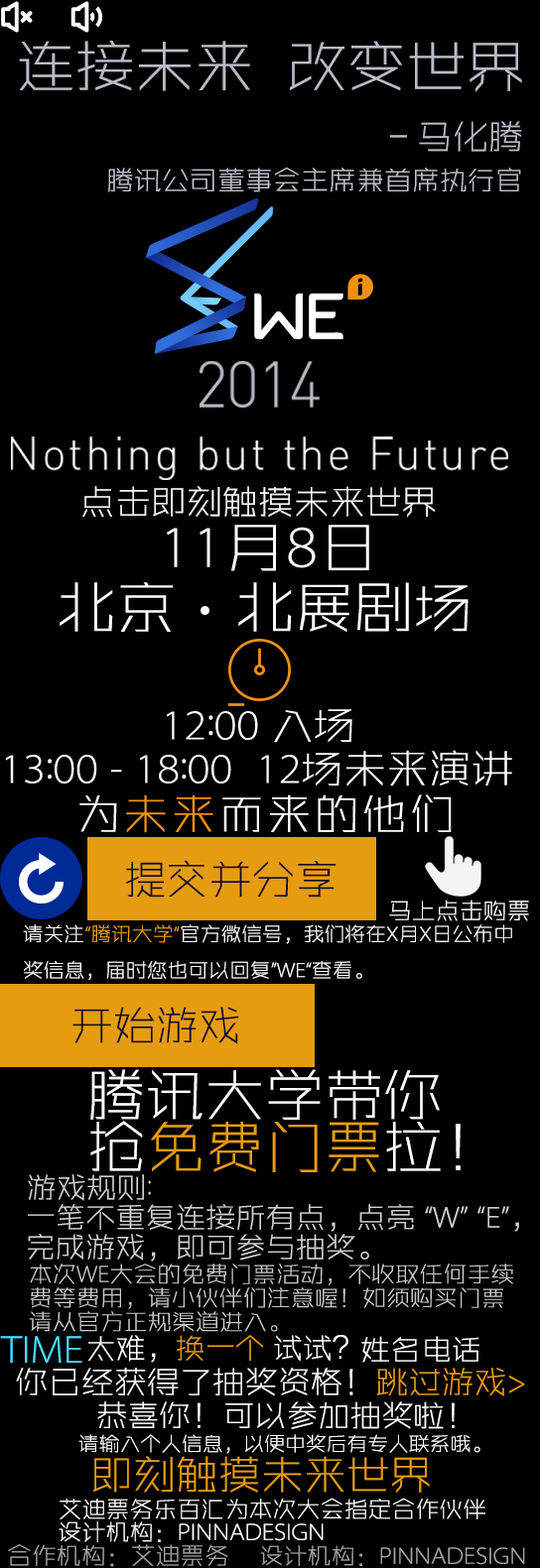
<style>
.page{position:relative;width:540px;height:1568px;background:#000000}
.page>*{position:absolute;margin:0}
.t1{font:59.5px "ZHSRXT--GBK1-0";color:#b9bbc7;text-transform:uppercase}
.t2{font:35.7px "ZHSRXT--GBK1-0";color:#b9bbc7;text-transform:uppercase}
.t3{font:27.8px "ZHSRXT--GBK1-0";color:#c0c1cd;text-transform:uppercase}
.t4{font:35.7px "ZHSRXT--GBK1-0";color:#f8f8f8;text-transform:uppercase}
.t5{font:42.6px "ZHSRXT--GBK1-0";color:#0b0a26;text-transform:uppercase}
.t6{font:23.8px "ZHSRXT--GBK1-0";color:#ffffff;text-transform:uppercase}
.t7{font:20.6px "ZHSRXT--GBK1-0";color:#ffffff;text-transform:uppercase}
.t8{font:20.6px "ZHSRXT--GBK1-0";color:#e69c11;text-transform:uppercase}
.t9{font:59.5px "ZHSRXT--GBK1-0";color:#ffffff;text-transform:uppercase}
.t10{font:59.5px "ZHSRXT--GBK1-0";color:#e69c11;text-transform:uppercase}
.t11{font:30px "ZHSRXT--GBK1-0";color:#d1d1d1;text-transform:uppercase}
.t12{font:39.1px "ZHSRXT--GBK1-0";color:#48ddff;text-transform:uppercase}
.t13{font:29.8px "ZHSRXT--GBK1-0";color:#ffffff;text-transform:uppercase}
.t14{font:29.8px "ZHSRXT--GBK1-0";color:#e69c11;text-transform:uppercase}
.t15{font:32.7px "ZHSRXT--GBK1-0";color:#ffffff;text-transform:uppercase}
.t16{font:32.7px "ZHSRXT--GBK1-0";color:#e69c11;text-transform:uppercase}
.t17{font:31.7px "ZHSRXT--GBK1-0";color:#ffffff;text-transform:uppercase}
.t18{font:42.6px "ZHSRXT--GBK1-0";color:#e69c11;text-transform:uppercase}
.t19{font:24.7px "ZHSRXT--GBK1-0";color:#a3a3a3;text-transform:uppercase}
.t20{font:23.8px "ZHSRXT--GBK1-0";color:#a3a3a3;text-transform:uppercase}
</style>
<div class="page">
<p class="t1" style="left:19px;top:41px;width:503px;height:51px">连接未来  改变世界</p>
<p class="t2" style="left:390px;top:121px;width:132px;height:31px">－马化腾</p>
<p class="t3" style="left:108px;top:167px;width:413px;height:25px">腾讯公司董事会主席兼首席执行官</p>
<p class="t4" style="left:82px;top:486px;width:352px;height:32px">点击即刻触摸未来世界</p>
<p class="t5" style="left:126px;top:860px;width:210px;height:38px">提交并分享</p>
<p class="t6" style="left:389px;top:900px;width:140px;height:21px">马上点击购票</p>
<p class="t7" style="left:23px;top:924px;width:489px;height:56px">请关注<span class="t8">“腾讯大学“</span>官方微信号，我们将在X月X日公布中<br>奖信息，届时您也可以回复”WE“查看。</p>
<p class="t5" style="left:72px;top:1007px;width:167px;height:37px">开始游戏</p>
<p class="t9" style="left:90px;top:1069px;width:349px;height:51px">腾讯大学带你</p>
<p class="t10" style="left:90px;top:1121px;width:370px;height:51px"><span class="t9">抢</span>免费门票<span class="t9">拉！</span></p>
<p class="t11" style="left:28px;top:1174px;width:123px;height:27px">游戏规则:</p>
<p class="t11" style="left:28px;top:1204px;width:491px;height:28px">一笔不重复连接所有点，点亮 “W” “E”，</p>
<p class="t11" style="left:28px;top:1234px;width:341px;height:28px">完成游戏，即可参与抽奖。</p>
<p class="t12" style="left:0px;top:1336px;width:82px;height:27px">time</p>
<p class="t13" style="left:88px;top:1335px;width:260px;height:28px">太难，<span class="t14">换一个 </span>试试？</p>
<p class="t13" style="left:361px;top:1336px;width:56px;height:27px">姓名</p>
<p class="t13" style="left:424px;top:1336px;width:55px;height:26px">电话</p>
<p class="t15" style="left:16px;top:1368px;width:509px;height:28px">你已经获得了抽奖资格！<span class="t16">跳过游戏&gt;</span></p>
<p class="t17" style="left:97px;top:1401px;width:357px;height:28px">恭喜你！可以参加抽奖啦！</p>
<p class="t7" style="left:78px;top:1434px;width:402px;height:20px">请输入个人信息，以便中奖后有专人联系哦。</p>
<p class="t18" style="left:93px;top:1456px;width:336px;height:38px">即刻触摸未来世界</p>
<p class="t6" style="left:60px;top:1498px;width:425px;height:21px">艾迪票务乐百汇为本次大会指定合作伙伴</p>
<p class="t6" style="left:59px;top:1521px;width:264px;height:21px">设计机构：pinnadesign</p>
<p class="t19" style="left:8px;top:1544px;width:220px;height:23px">合作机构：艾迪票务</p>
<p class="t20" style="left:260px;top:1545px;width:265px;height:21px">设计机构：pinnadesign</p>
</div>
